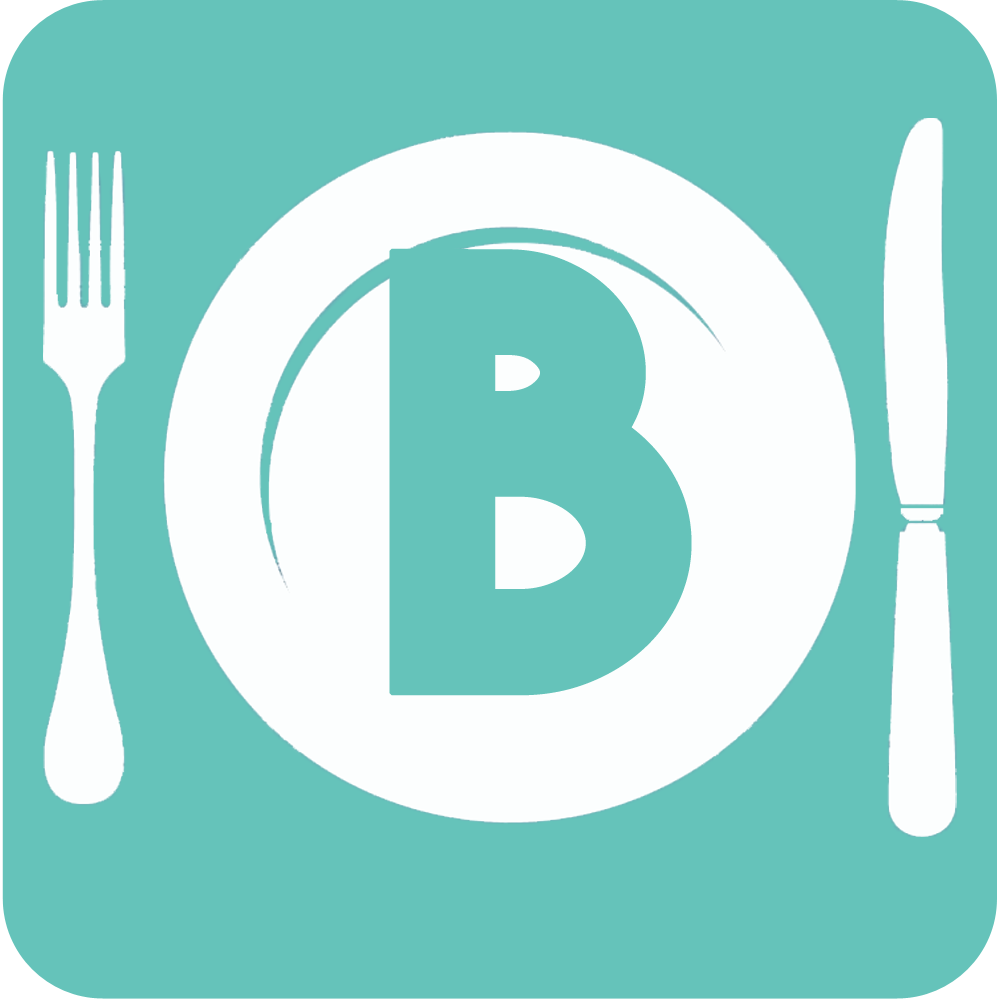
<style>
.page{position:relative;width:1000px;height:1000px;background:#65c3ba}
.page>*{position:absolute;margin:0}
.t1{font:600px "TheBoldFont";color:#65c3ba;text-transform:uppercase;font-weight:bold}
</style>
<div class="page">
<p class="t1" style="left:389px;top:248px;width:303px;height:448px">B</p>
</div>
